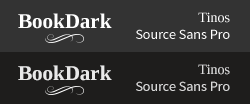
<style>
.page{position:relative;width:250px;height:104px;background:#333333}
.page>*{position:absolute;margin:0}
.t1{font:21px "Tinos-Bold";color:#ffffff}
.t2{font:14px/17px "SourceSansPro-Regular";color:#ffffff}
.t3{font:14px/17px "Tinos";color:#ffffff}
.t4{font:21px "Tinos-Bold";color:#e9e9e9}
.t5{font:14px/17px "SourceSansPro-Regular";color:#dbdbdb}
.t6{font:14px/17px "Tinos";color:#dbdbdb}
</style>
<div class="page">
<p class="t1" style="left:18px;top:13px;width:94px;height:16px">BookDark</p>
<p class="t2" style="left:136px;top:12px;width:94px;height:27px;text-align:right"><span class="t3">Tinos<br></span>Source Sans Pro</p>
<p class="t4" style="left:18px;top:65px;width:94px;height:16px">BookDark</p>
<p class="t5" style="left:136px;top:64px;width:94px;height:27px;text-align:right"><span class="t6">Tinos<br></span>Source Sans Pro</p>
</div>
